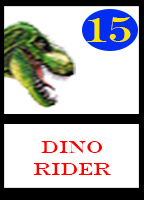
<style>
.page{position:relative;width:144px;height:200px;background:#ffffff}
.page>*{position:absolute;margin:0}
.t1{font:36px "EngraversMT";color:#ffe400}
.t2{font:18px "EngraversMT";color:#ff0000}
</style>
<div class="page">
<p class="t1" style="left:87px;top:17px;width:44px;height:25px">15</p>
<p class="t2" style="left:33px;top:141px;width:78px;height:34px;text-align:center">Dino<br>RIder</p>
</div>
